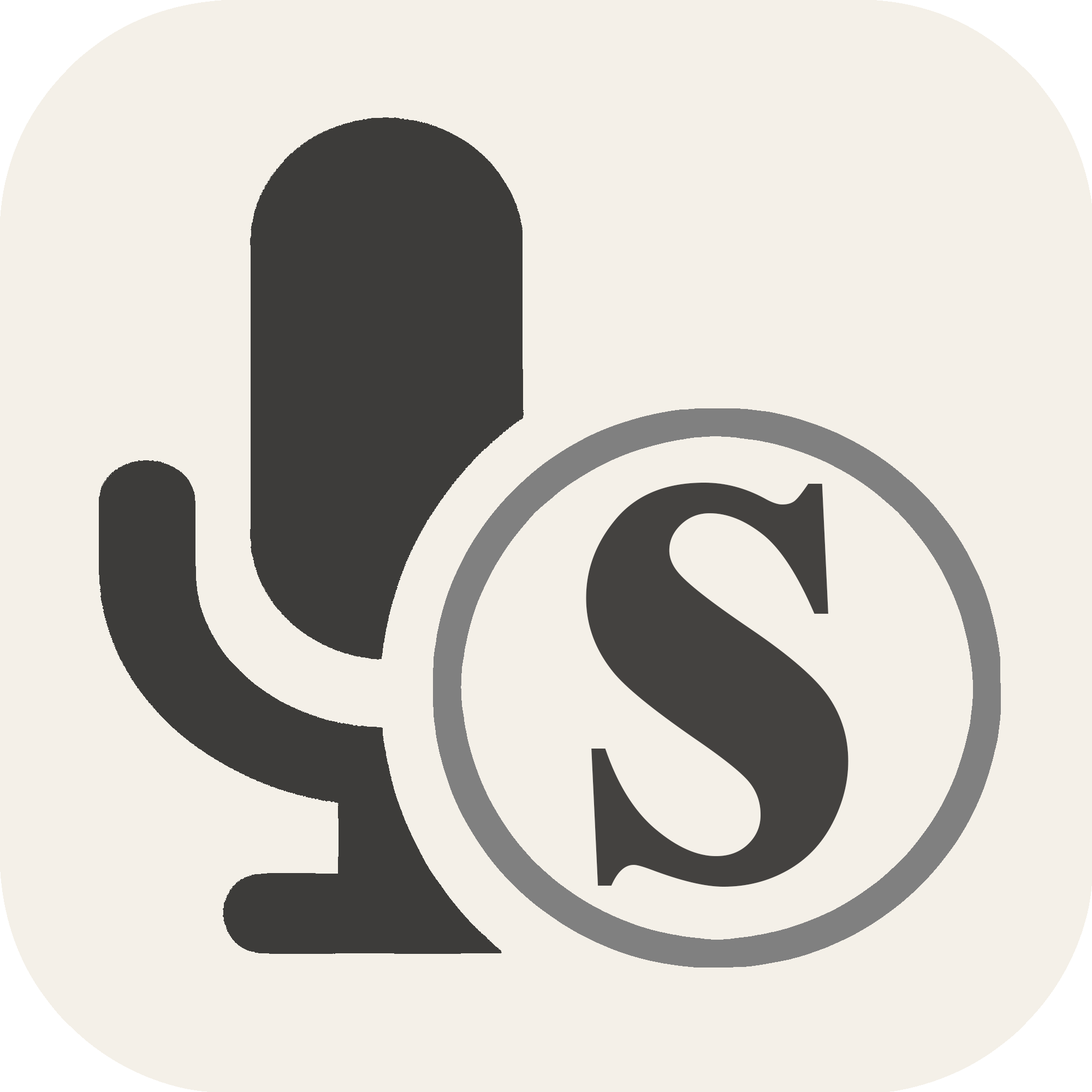
<style>
.page{position:relative;width:1092px;height:1092px;background:#f4f0e8}
.page>*{position:absolute;margin:0}
.t1{font:834.7px "TimesNewRomanPS-BoldMT";color:#444240}
</style>
<div class="page">
<p class="t1" style="left:586px;top:483px;width:262px;height:404px">s</p>
</div>
